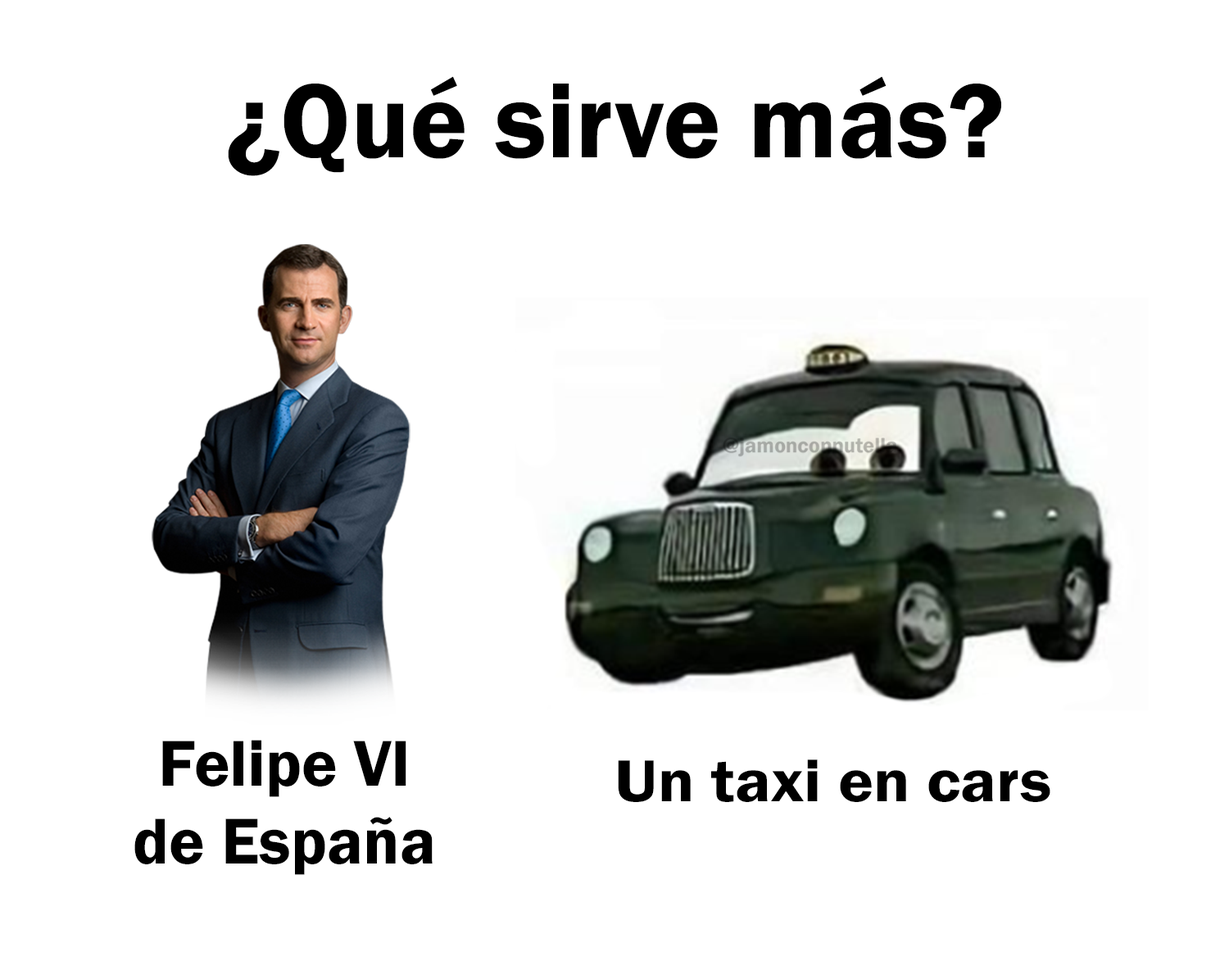
<style>
.page{position:relative;width:1229px;height:970px;background:#ffffff}
.page>*{position:absolute;margin:0}
.t1{font:108.8px "FranklinGothic-Demi";color:#000000}
.t2{font:66.9px "FranklinGothic-Demi";color:#000000}
.t3{font:61.1px "FranklinGothic-Demi";color:#000000;scale:1.09 1}
</style>
<div class="page">
<p class="t1" style="left:228px;top:76px;width:773px;height:100px">¿Qué sirve más?</p>
<p class="t2" style="left:134px;top:740px;width:299px;height:135px;text-align:center">Felipe VI<br>de España</p>
<p class="t3" style="left:618px;top:760px;width:432px;height:42px">Un taxi en cars</p>
</div>
